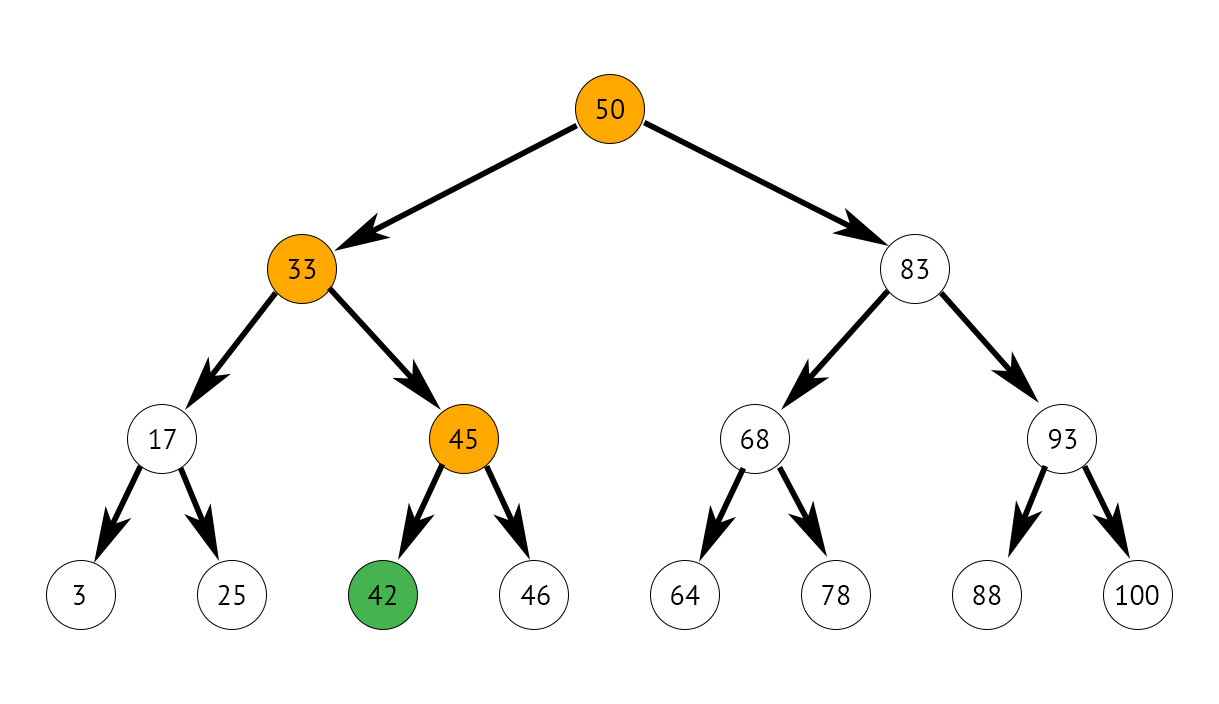
<style>
.page{position:relative;width:1219px;height:704px;background:#ffffff}
.page>*{position:absolute;margin:0}
.t1{font:28px "PTSans-Regular";color:#000000}
</style>
<div class="page">
<p class="t1" style="left:596px;top:99px;width:28px;height:20px">50</p>
<p class="t1" style="left:289px;top:259px;width:27px;height:20px">33</p>
<p class="t1" style="left:901px;top:259px;width:28px;height:20px">83</p>
<p class="t1" style="left:149px;top:429px;width:27px;height:20px">17</p>
<p class="t1" style="left:449px;top:429px;width:28px;height:20px">45</p>
<p class="t1" style="left:741px;top:429px;width:28px;height:20px">68</p>
<p class="t1" style="left:1048px;top:429px;width:29px;height:20px">93</p>
<p class="t1" style="left:74px;top:585px;width:11px;height:20px">3</p>
<p class="t1" style="left:218px;top:585px;width:27px;height:20px">25</p>
<p class="t1" style="left:368px;top:585px;width:28px;height:20px">42</p>
<p class="t1" style="left:521px;top:585px;width:29px;height:20px">46</p>
<p class="t1" style="left:671px;top:585px;width:29px;height:20px">64</p>
<p class="t1" style="left:822px;top:585px;width:28px;height:20px">78</p>
<p class="t1" style="left:973px;top:585px;width:28px;height:20px">88</p>
<p class="t1" style="left:1116px;top:585px;width:43px;height:20px">100</p>
</div>
